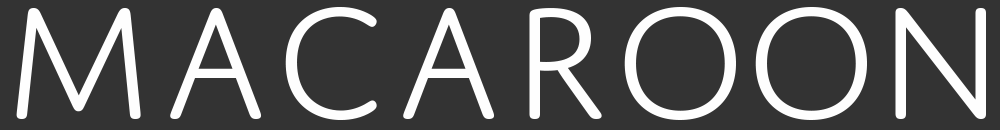
<style>
.page{position:relative;width:1000px;height:130px;background:#333333}
.page>*{position:absolute;margin:0}
.t1{font:168.4px "DomusTitlingLight";letter-spacing:0.05em;color:#fefefe}
</style>
<div class="page">
<p class="t1" style="left:16px;top:6px;width:970px;height:115px">Macaroon</p>
</div>
